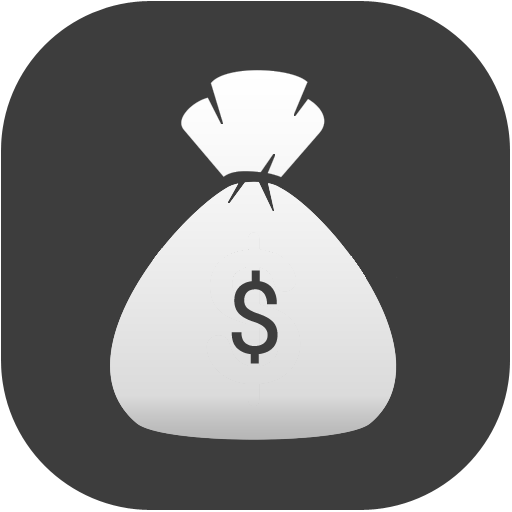
<style>
.page{position:relative;width:512px;height:512px;background:#3d3d3d}
.page>*{position:absolute;margin:0}
.t1{font:100px "Roboto-Regular";color:#3d3d3d}
</style>
<div class="page">
<p class="t1" style="left:231px;top:270px;width:47px;height:94px">$</p>
</div>
